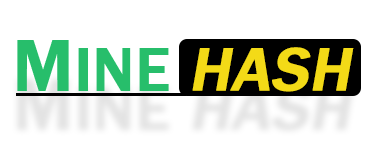
<style>
.page{position:relative;width:377px;height:148px;background:#ffffff}
.page>*{position:absolute;margin:0}
.t1{font:63px "FranklinGothic-Medium";color:#f3da17;font-weight:bold;font-style:italic}
.t2{font:75px "FranklinGothic-Medium";color:#27be6b;font-weight:bold}
.t3{font:63px "FranklinGothic-Medium";color:#27be6b;font-weight:bold}
</style>
<div class="page">
<p class="t1" style="left:17px;top:40px;width:337px;height:52px"><span class="t2">M</span><span class="t3">INE </span>HASH</p>
</div>
